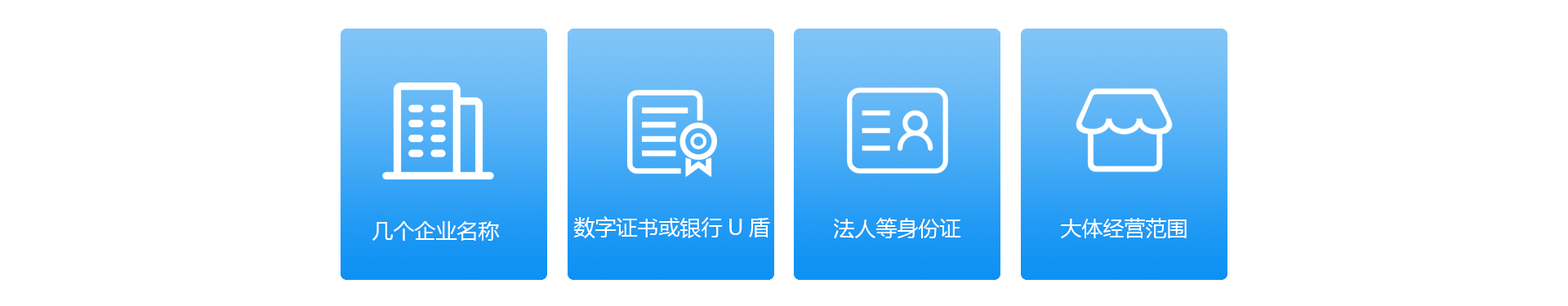
<style>
.page{position:relative;width:1568px;height:306px;background:#ffffff}
.page>*{position:absolute;margin:0}
.t1{font:21.2px "MicrosoftYaHei";color:#ffffff}
</style>
<div class="page">
<p class="t1" style="left:372px;top:221px;width:128px;height:20px">几个企业名称</p>
<p class="t1" style="left:573px;top:216px;width:197px;height:22px">数字证书或银行U盾</p>
<p class="t1" style="left:834px;top:218px;width:127px;height:20px">法人等身份证</p>
<p class="t1" style="left:1060px;top:218px;width:127px;height:20px">大体经营范围</p>
</div>
